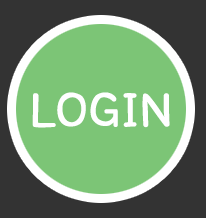
<style>
.page{position:relative;width:206px;height:218px;background:#7cc576}
.page>*{position:absolute;margin:0}
.t1{font:67px "LayijiMaHaNiYomV1.5";letter-spacing:0.01em;color:#ffffff;font-weight:bold}
</style>
<div class="page">
<p class="t1" style="left:32px;top:92px;width:138px;height:36px">LOGIN</p>
</div>
